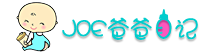
<style>
.page{position:relative;width:220px;height:53px;background:#ffffff}
.page>*{position:absolute;margin:0}
.t1{font:24px "HYj2gj";letter-spacing:-0.05em;color:#00cdcd}
</style>
<div class="page">
<p class="t1" style="left:62px;top:17px;width:136px;height:23px">JOE爸爸日记</p>
</div>
